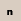
<style>
.page{position:relative;width:21px;height:21px;background:#d9cdc1}
.page>*{position:absolute;margin:0}
.t1{font:9px "Tahoma-Bold";color:#000000}
</style>
<div class="page">
<p class="t1" style="left:7px;top:10px;width:6px;height:5px">n</p>
</div>
